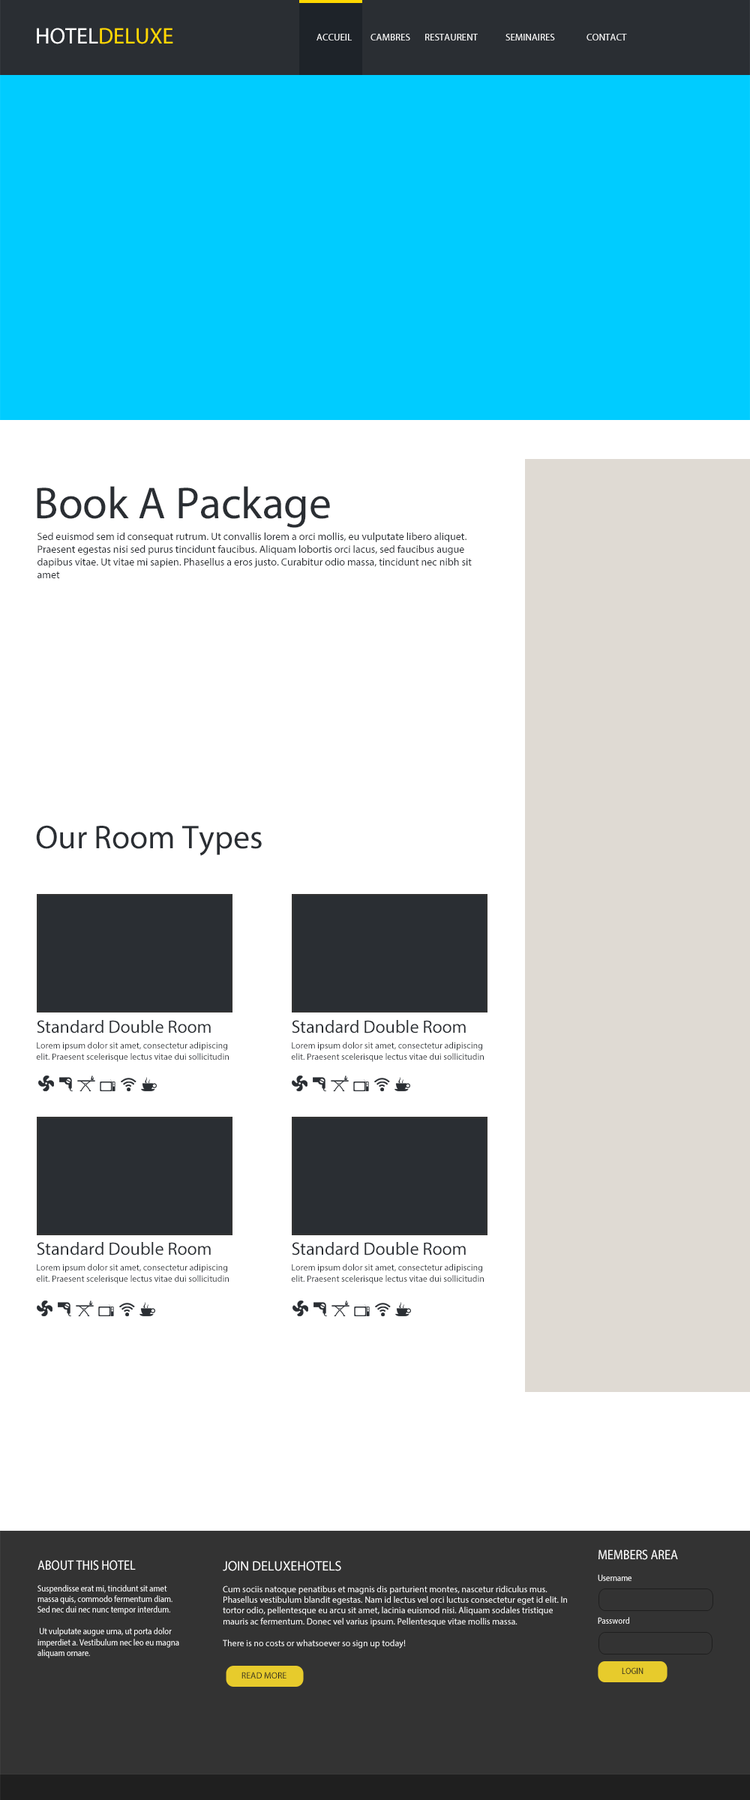
<style>
.page{position:relative;width:750px;height:1800px;background:#ffffff}
.page>*{position:absolute;margin:0}
.t1{font:22.5px "MyriadPro-Regular";color:#ffd700}
.t2{font:22.5px "MyriadPro-Regular";color:#ffffff}
.t3{font:9.8px "MyriadPro-Regular";color:#ffffff;text-transform:uppercase}
.t4{font:45px "MyriadPro-Regular";color:#2a2e33}
.t5{font:10.5px "MyriadPro-Regular";color:#2a2e33}
.t6{font:33px "MyriadPro-Regular";color:#2a2e33}
.t7{font:9px "MyriadPro-Regular";color:#2a2e33}
.t8{font:18px "MyriadPro-Regular";color:#2a2e33}
.t9{font:9px "MyriadPro-Regular";color:#ffffff;scale:0.9 1}
.t10{font:13.5px "MyriadPro-Regular";color:#ffffff;scale:0.9 1}
.t11{font:9px "MyriadPro-Regular";color:#ffffff}
.t12{font:13.5px "MyriadPro-Regular";color:#ffffff}
.t13{font:9px "MyriadPro-Regular";color:#1e1e1e}
.t14{font:9px "MyriadPro-Regular";color:#1e1e1e;scale:0.9 1}
</style>
<div class="page">
<p class="t1" style="left:37px;top:28px;width:136px;height:16px"><span class="t2">HOTEL</span>DELUXE</p>
<p class="t3" style="left:316px;top:34px;width:311px;height:6px">Accueil CAMBRES Restaurent  SEMINAIRES  CONTACT</p>
<p class="t4" style="left:37px;top:486px;width:293px;height:42px">Book A Package</p>
<p class="t5" style="left:38px;top:532px;width:434px;height:46px">Sed euismod sem id consequat rutrum. Ut convallis lorem a orci mollis, eu vulputate libero aliquet. Praesent egestas nisi sed purus tincidunt faucibus. Aliquam lobortis orci lacus, sed faucibus augue dapibus vitae. Ut vitae mi sapien. Phasellus a eros justo. Curabitur odio massa, tincidunt nec nibh sit amet</p>
<p class="t6" style="left:36px;top:825px;width:226px;height:31px">Our Room Types</p>
<p class="t7" style="left:36px;top:1020px;width:193px;height:42px"><span class="t8">Standard Double Room<br>  <br></span>Lorem ipsum dolor sit amet, consectetur adipiscing elit. Praesent scelerisque lectus vitae dui sollicitudin commodo.</p>
<p class="t7" style="left:291px;top:1020px;width:193px;height:42px"><span class="t8">Standard Double Room<br>  <br></span>Lorem ipsum dolor sit amet, consectetur adipiscing elit. Praesent scelerisque lectus vitae dui sollicitudin commodo.</p>
<p class="t7" style="left:36px;top:1242px;width:193px;height:42px"><span class="t8">Standard Double Room<br>  <br></span>Lorem ipsum dolor sit amet, consectetur adipiscing elit. Praesent scelerisque lectus vitae dui sollicitudin commodo.</p>
<p class="t7" style="left:291px;top:1242px;width:193px;height:42px"><span class="t8">Standard Double Room<br>  <br></span>Lorem ipsum dolor sit amet, consectetur adipiscing elit. Praesent scelerisque lectus vitae dui sollicitudin commodo.</p>
<p class="t9" style="left:598px;top:1550px;width:80px;height:74px"><span class="t10">MEMBERS AREA<br></span><br>Username<br><br><br><br>Password</p>
<p class="t9" style="left:38px;top:1560px;width:141px;height:98px"><span class="t10">ABOUT THIS HOTEL<br></span><br>Suspendisse erat mi, tincidunt sit amet massa quis, commodo fermentum diam. Sed nec dui nec nunc tempor interdum. <br><br> Ut vulputate augue urna, ut porta dolor imperdiet a. Vestibulum nec leo eu magna aliquam ornare.</p>
<p class="t11" style="left:223px;top:1561px;width:344px;height:87px"><span class="t12">JOIN DELUXEHOTELS<br></span><br>Cum sociis natoque penatibus et magnis dis parturient montes, nascetur ridiculus mus. Phasellus vestibulum blandit egestas. Nam id lectus vel orci luctus consectetur eget id elit. In tortor odio, pellentesque eu arcu sit amet, lacinia euismod nisi. Aliquam sodales tristique mauris ac fermentum. Donec vel varius ipsum. Pellentesque vitae mollis massa. <br><br>There is no costs or whatsoever so sign up today!</p>
<p class="t13" style="left:242px;top:1672px;width:44px;height:6px">READ MORE</p>
<p class="t14" style="left:622px;top:1667px;width:22px;height:7px">LOGIN</p>
</div>
